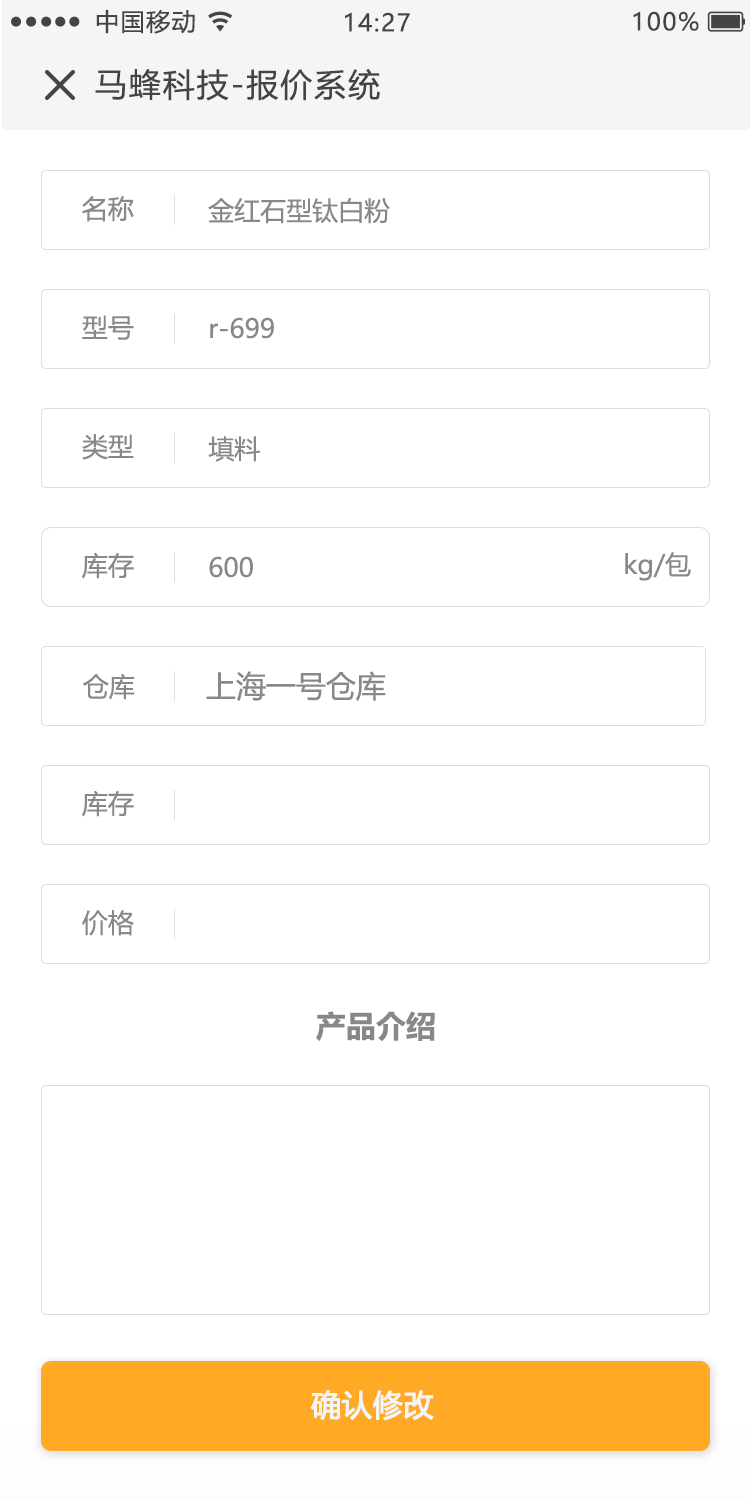
<style>
.page{position:relative;width:750px;height:1500px;background:#ffffff}
.page>*{position:absolute;margin:0}
.t1{font:24px "MicrosoftYaHeiUI";letter-spacing:0.06em;color:#444444}
.t2{font:32px "MicrosoftYaHeiUI";letter-spacing:0.06em;color:#444444}
.t3{font:26px "MicrosoftYaHeiUI";color:#888888}
.t4{font:30px "MicrosoftYaHeiUI";color:#888888}
.t5{font:30px "MicrosoftYaHeiUI-Bold";color:#888888}
.t6{font:30px "MicrosoftYaHeiUI";color:#f5f5f5;font-weight:bold}
</style>
<div class="page">
<p class="t1" style="left:96px;top:9px;width:99px;height:25px">中国移动</p>
<p class="t1" style="left:345px;top:12px;width:65px;height:20px">14:27</p>
<p class="t1" style="left:633px;top:11px;width:66px;height:20px">100%</p>
<p class="t2" style="left:95px;top:68px;width:285px;height:33px">马蜂科技-报价系统</p>
<p class="t3" style="left:82px;top:196px;width:52px;height:26px">名称</p>
<p class="t3" style="left:208px;top:198px;width:182px;height:26px">金红石型钛白粉</p>
<p class="t3" style="left:82px;top:315px;width:52px;height:25px">型号</p>
<p class="t3" style="left:210px;top:317px;width:64px;height:22px">r-699</p>
<p class="t3" style="left:82px;top:434px;width:52px;height:26px">类型</p>
<p class="t3" style="left:208px;top:436px;width:52px;height:26px">填料</p>
<p class="t3" style="left:82px;top:552px;width:52px;height:27px">库存</p>
<p class="t3" style="left:209px;top:556px;width:44px;height:22px">600</p>
<p class="t3" style="left:625px;top:552px;width:66px;height:29px">kg/包</p>
<p class="t3" style="left:83px;top:673px;width:52px;height:27px">仓库</p>
<p class="t4" style="left:206px;top:671px;width:180px;height:30px">上海一号仓库</p>
<p class="t3" style="left:82px;top:790px;width:52px;height:27px">库存</p>
<p class="t3" style="left:82px;top:910px;width:52px;height:26px">价格</p>
<p class="t5" style="left:316px;top:1011px;width:119px;height:31px">产品介绍</p>
<p class="t6" style="left:310px;top:1390px;width:124px;height:31px">确认修改</p>
</div>
